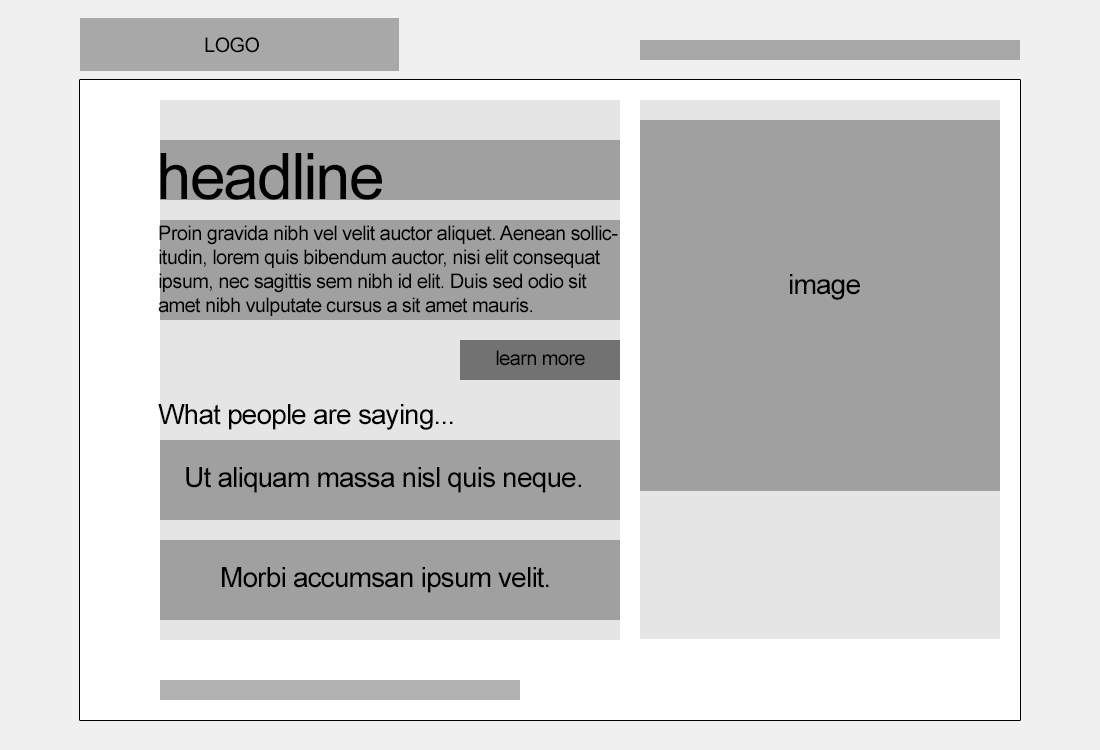
<style>
.page{position:relative;width:1100px;height:750px;background:#a0a0a0}
.page>*{position:absolute;margin:0}
.t1{font:20px "ArialMT";letter-spacing:-0.03em;color:#000000}
.t2{font:64px "ArialMT";letter-spacing:-0.03em;color:#000000}
.t3{font:28px "ArialMT";letter-spacing:-0.03em;color:#000000}
</style>
<div class="page">
<p class="t1" style="left:205px;top:37px;width:54px;height:16px">LOGO</p>
<p class="t2" style="left:160px;top:153px;width:222px;height:47px">headline</p>
<p class="t1" style="left:158px;top:225px;width:460px;height:91px">Proin gravida nibh vel velit auctor aliquet. Aenean sollicitudin, lorem quis bibendum auctor, nisi elit consequat ipsum, nec sagittis sem nibh id elit. Duis sed odio sit amet nibh vulputate cursus a sit amet mauris.</p>
<p class="t3" style="left:790px;top:274px;width:70px;height:26px">image</p>
<p class="t1" style="left:496px;top:350px;width:89px;height:16px">learn more</p>
<p class="t3" style="left:158px;top:404px;width:295px;height:26px">What people are saying...</p>
<p class="t3" style="left:186px;top:467px;width:395px;height:26px">Ut aliquam massa nisl quis neque.</p>
<p class="t3" style="left:222px;top:567px;width:327px;height:26px">Morbi accumsan ipsum velit.</p>
</div>
